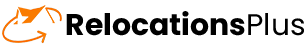
<style>
.page{position:relative;width:306px;height:50px;background:#ffffff}
.page>*{position:absolute;margin:0}
.t1{font:29.9px "Poppins-Bold";color:#000000}
.t2{font:29.9px "Poppins-Regular";color:#000000}
</style>
<div class="page">
<p class="t1" style="left:66px;top:11px;width:238px;height:25px">Relocations<span class="t2">Plus</span></p>
</div>
